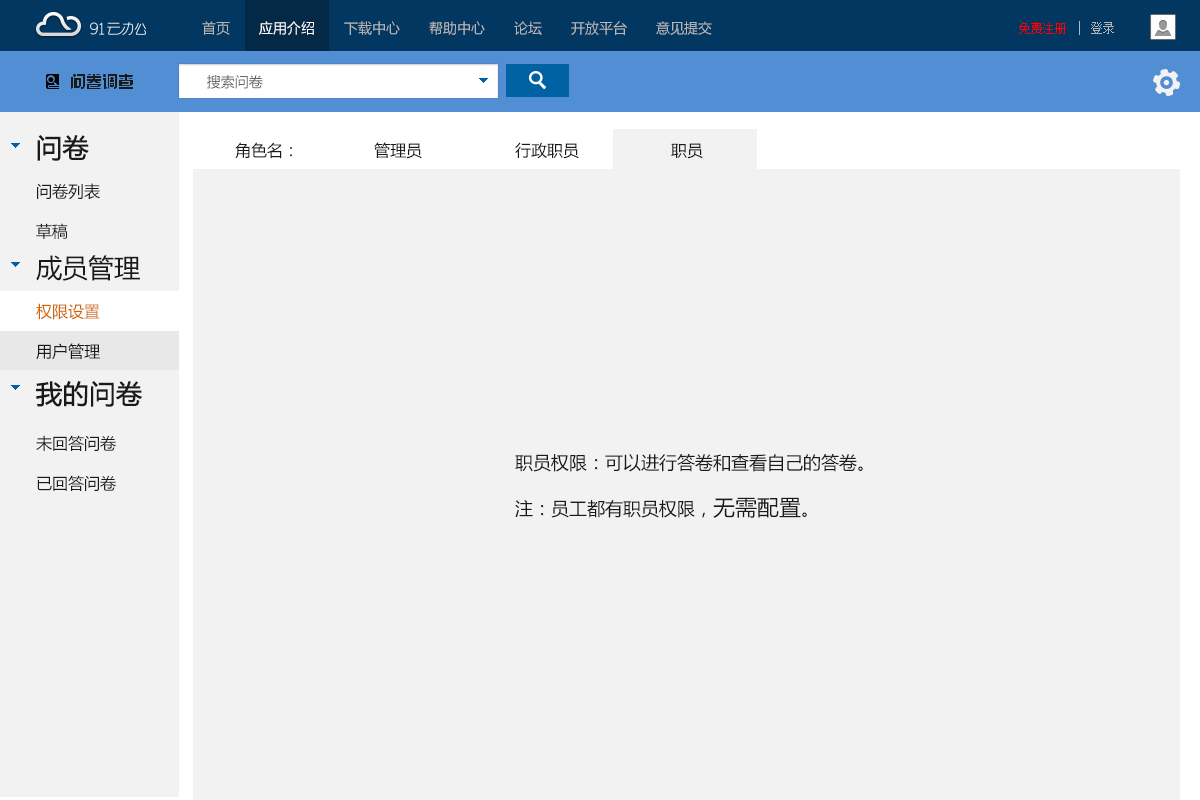
<style>
.page{position:relative;width:1200px;height:800px;background:#f2f2f2}
.page>*{position:absolute;margin:0}
.t1{font:14px "MicrosoftYaHei";color:#b6b6b6}
.t2{font:14px "MicrosoftYaHei";color:#ffffff}
.t3{font:12px "SimSun";color:#fe0000}
.t4{font:12px "SimSun";color:#b6b6b6}
.t5{font:14px "MicrosoftYaHei";color:#666666}
.t6{font:16px/40px "MicrosoftYaHei";color:#1a1a1a}
.t7{font:26px/40px "MicrosoftYaHei";color:#1a1a1a;font-weight:bold}
.t8{font:26px/40px "MicrosoftYaHei";color:#1a1a1a}
.t9{font:16px/40px "MicrosoftYaHei";color:#d16700}
.t10{font:26px/46px "MicrosoftYaHei";color:#1a1a1a;font-weight:bold}
.t11{font:16px/46px "MicrosoftYaHei";color:#1a1a1a}
.t12{font:16px "MicrosoftYaHei";color:#1a1a1a}
.t13{font:18px/46px "MicrosoftYaHei";color:#1a1a1a}
.t14{font:22px/46px "MicrosoftYaHei";color:#1a1a1a}
</style>
<div class="page">
<p class="t1" style="left:202px;top:21px;width:510px;height:14px">首页       <span class="t2">应用介绍</span>       下载中心       帮助中心       论坛       开放平台       意见提交</p>
<p class="t3" style="left:1019px;top:22px;width:95px;height:12px">免费注册<span class="t4">    登录</span></p>
<p class="t5" style="left:207px;top:75px;width:56px;height:14px">搜索问卷</p>
<p class="t6" style="left:36px;top:135px;width:106px;height:356px"><span class="t7">问卷<br></span>问卷列表<br>草稿<br><span class="t8">成员管理<br></span><span class="t9">权限设置<br></span>用户管理<br><span class="t10">我的问卷<br></span><span class="t11">未回答问卷<br></span>已回答问卷</p>
<p class="t12" style="left:235px;top:142px;width:57px;height:17px">角色名：</p>
<p class="t12" style="left:374px;top:142px;width:48px;height:17px">管理员</p>
<p class="t12" style="left:515px;top:142px;width:64px;height:17px">行政职员</p>
<p class="t12" style="left:671px;top:143px;width:32px;height:16px">职员</p>
<p class="t13" style="left:515px;top:454px;width:348px;height:64px">职员权限：可以进行答卷和查看自己的答卷。<br>注：员工都有职员权限，<span class="t14">无需配置</span>。</p>
</div>
